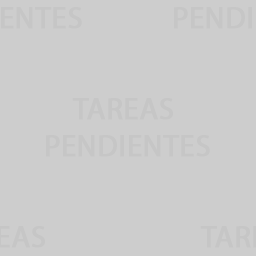
<style>
.page{position:relative;width:256px;height:256px;background:#cdcdcd}
.page>*{position:absolute;margin:0}
.t1{font:12px "MyriadPro-Regular";color:#c6c6c6;text-transform:uppercase;font-weight:bold}
</style>
<div class="page">
<p class="t1" style="left:46px;top:98px;width:164px;height:59px;text-align:center">Tareas <br>Pendientes</p>
</div>
